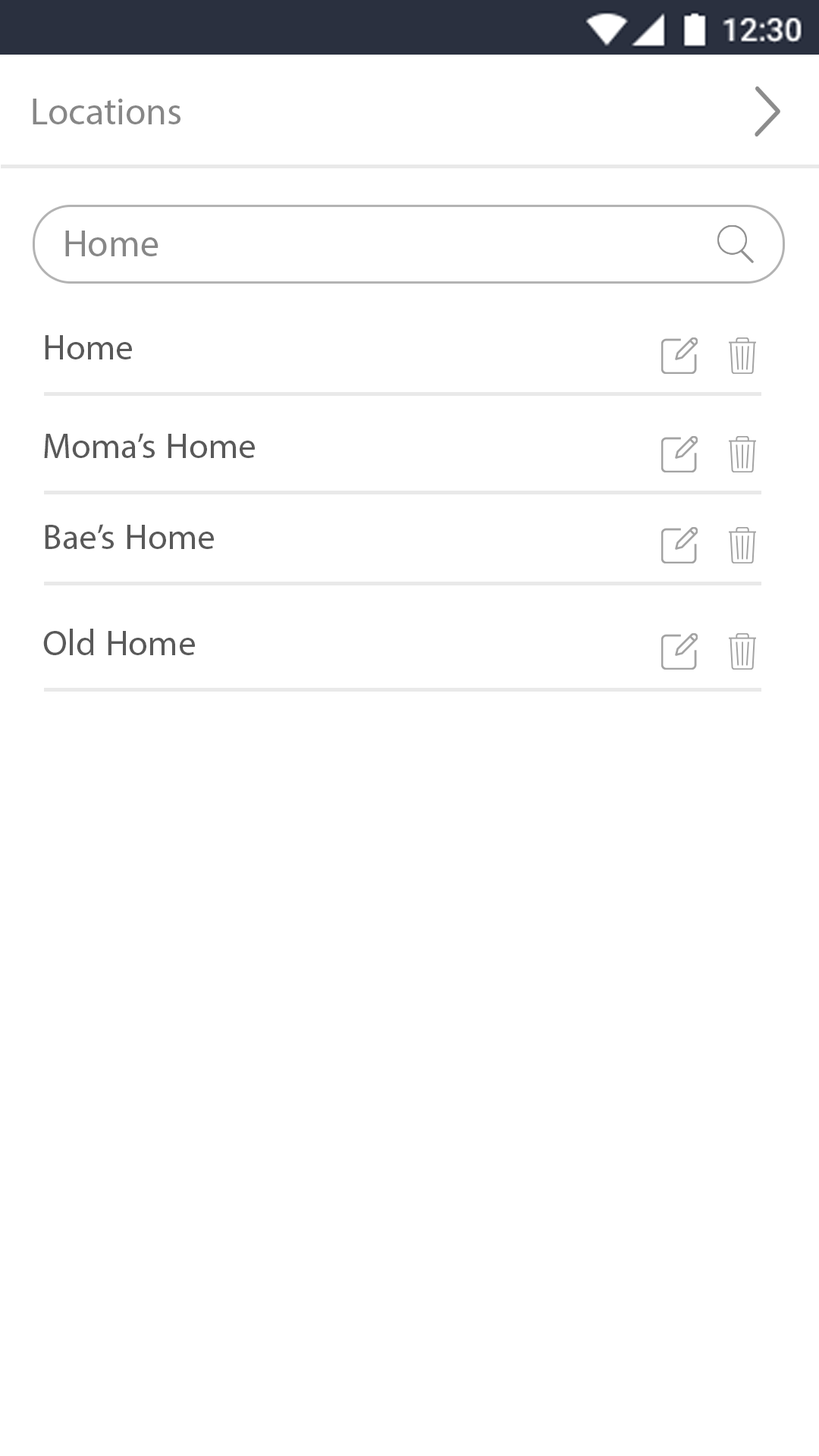
<style>
.page{position:relative;width:819px;height:1456px;background:#ffffff}
.page>*{position:absolute;margin:0}
.t1{font:53.1px "MyriadArabic-Regular";color:#878787}
.t2{font:50px "MyriadArabic-Regular";color:#595959}
</style>
<div class="page">
<p class="t1" style="left:33px;top:99px;width:147px;height:25px">Locations</p>
<p class="t1" style="left:65px;top:231px;width:93px;height:25px">Home</p>
<p class="t2" style="left:45px;top:335px;width:87px;height:24px">Home</p>
<p class="t2" style="left:44px;top:433px;width:211px;height:25px">Moma’s Home</p>
<p class="t2" style="left:45px;top:524px;width:169px;height:25px">Bae’s Home</p>
<p class="t2" style="left:43px;top:629px;width:152px;height:26px">Old Home</p>
</div>
